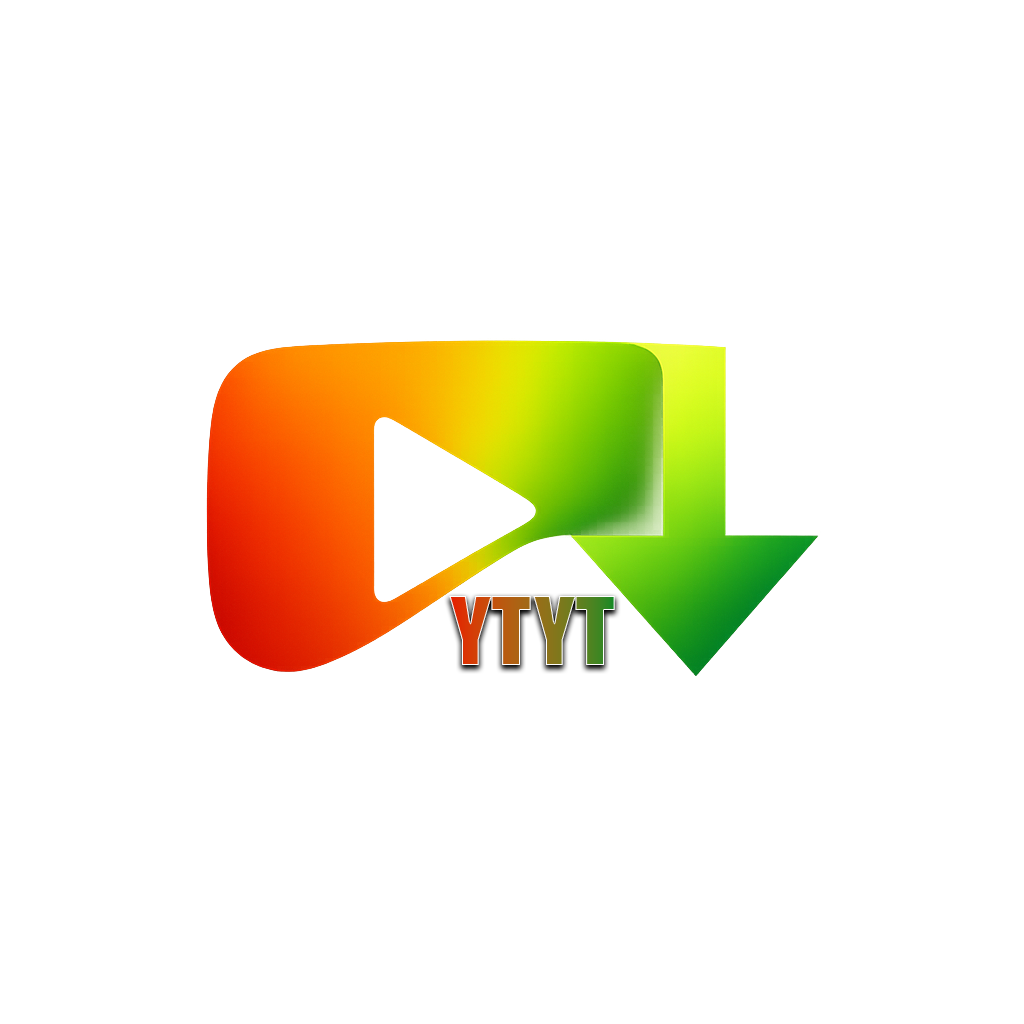
<style>
.page{position:relative;width:1024px;height:1024px;background:#ffffff}
.page>*{position:absolute;margin:0}
.t1{font:87.3px "Impact"}
</style>
<div class="page">
<p class="t1" style="left:449px;top:596px;width:166px;height:69px">YTYT</p>
</div>
